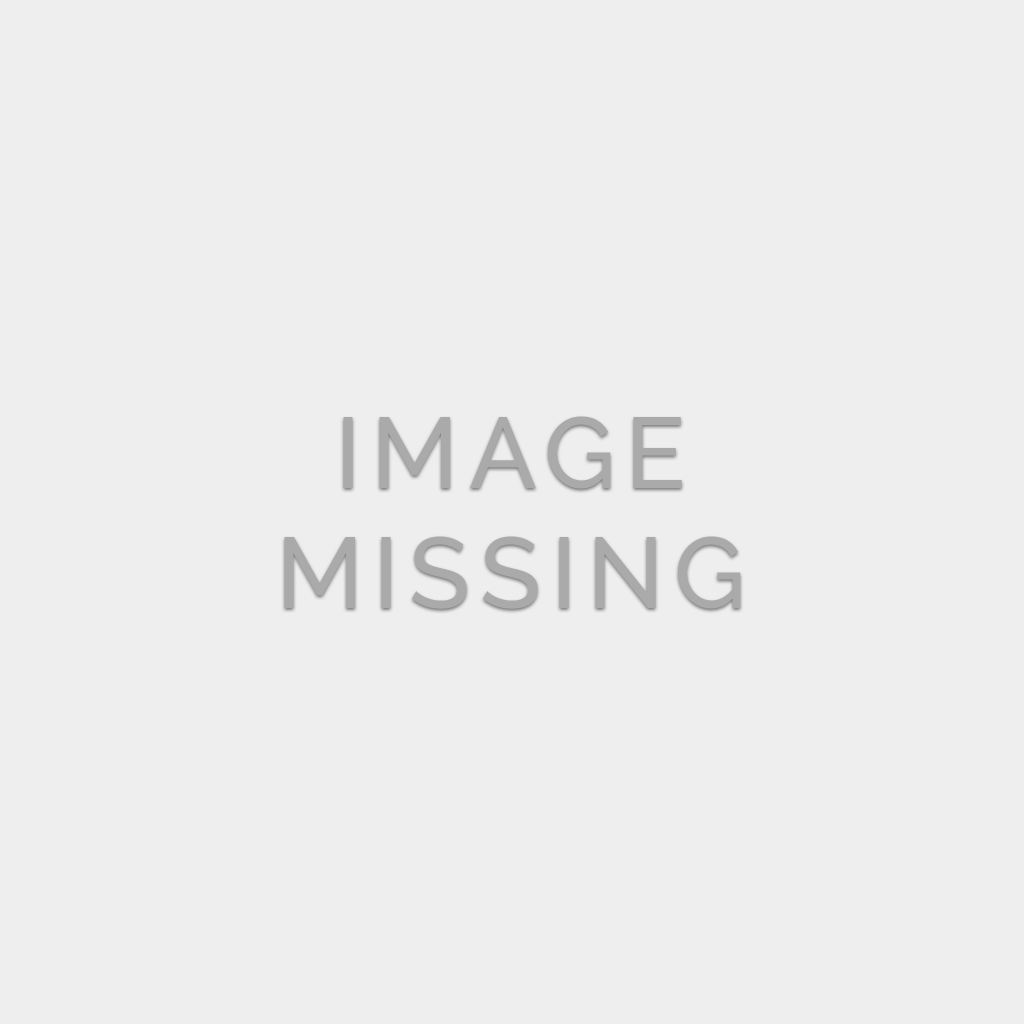
<style>
.page{position:relative;width:1024px;height:1024px;background:#eeeeee}
.page>*{position:absolute;margin:0}
.t1{font:100px "Raleway-Medium";letter-spacing:0.1em;color:#aaaaaa;text-transform:uppercase}
</style>
<div class="page">
<p class="t1" style="left:284px;top:416px;width:457px;height:193px;text-align:center">Image<br>Missing</p>
</div>
